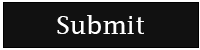
<style>
.page{position:relative;width:200px;height:50px;background:#111111}
.page>*{position:absolute;margin:0}
.t1{font:25px "LucidaFax";color:#ffffff}
</style>
<div class="page">
<p class="t1" style="left:57px;top:15px;width:87px;height:19px">Submit</p>
</div>
